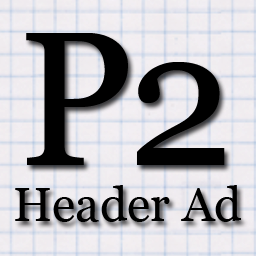
<style>
.page{position:relative;width:256px;height:256px}
.page>*{position:absolute;margin:0}
.t1{font:190px "Georgia";color:#000000}
.t2{font:48px "Georgia";color:#000000}
</style>
<div class="page">
<p class="t1" style="left:26px;top:33px;width:199px;height:132px">P2</p>
<p class="t2" style="left:15px;top:185px;width:226px;height:37px">Header Ad</p>
</div>
